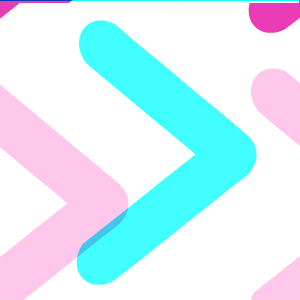
<style>
.page{position:relative;width:300px;height:300px;background:#ffffff}
.page>*{position:absolute;margin:0}
.t1{font:543.4px "Chalkboard";color:#41ffff;scale:0.94 1}
</style>
<div class="page">
<p class="t1" style="left:76px;top:19px;width:181px;height:265px">&gt;</p>
</div>
